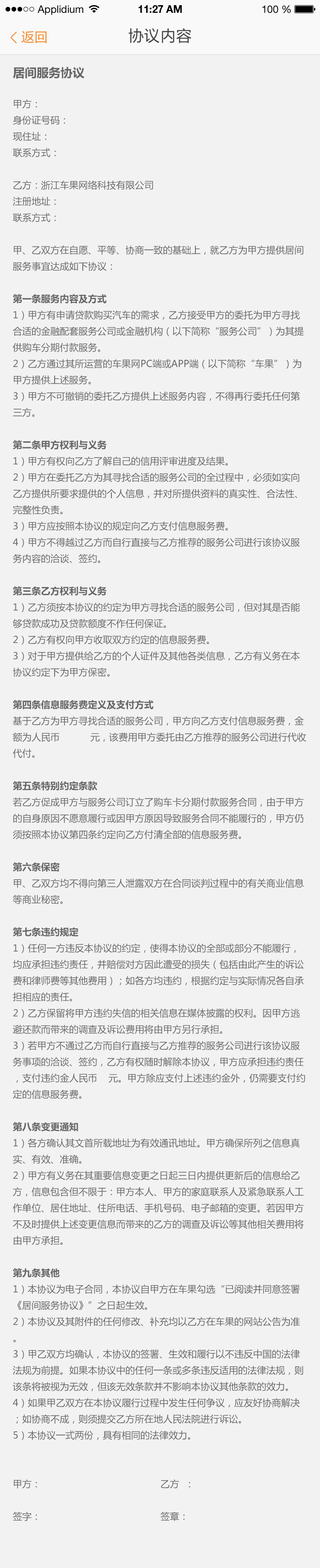
<style>
.page{position:relative;width:320px;height:1568px;background:#f2f2f2}
.page>*{position:absolute;margin:0}
.t1{font:10.3px "HelveticaNeueLTStd-Roman";color:#000000}
.t2{font:10.3px "HelveticaNeueLTStd-Bd";color:#000000}
.t3{font:15.4px "MicrosoftYaHei";letter-spacing:0.038em;color:#404040}
.t4{font:12.8px "MicrosoftYaHei";letter-spacing:0.038em;color:#f68929}
.t5{font:9.4px/16.2px "MicrosoftYaHei";color:#666666}
.t6{font:12px/16.2px "MicrosoftYaHei-Bold";color:#666666}
.t7{font:9.4px/16.2px "MicrosoftYaHei-Bold";color:#666666}
</style>
<div class="page">
<p class="t1" style="left:38px;top:5px;width:45px;height:10px">Applidium</p>
<p class="t2" style="left:138px;top:5px;width:44px;height:8px">11:27 AM</p>
<p class="t1" style="left:263px;top:5px;width:28px;height:8px">100 %</p>
<p class="t3" style="left:129px;top:28px;width:63px;height:15px">协议内容</p>
<p class="t4" style="left:21px;top:31px;width:26px;height:12px">返回</p>
<p class="t5" style="left:13px;top:67px;width:294px;height:1454px"><span class="t6">居间服务协议<br></span><br>甲方：<br>身份证号码： <br>现住址： <br>联系方式：<br><br>乙方：浙江车果网络科技有限公司<br>注册地址：<br>联系方式：<br><br>甲、乙双方在自愿、平等、协商一致的基础上，就乙方为甲方提供居间服务事宜达成如下协议：<br><br><span class="t7">第一条服务内容及方式<br></span>1）甲方有申请贷款购买汽车的需求，乙方接受甲方的委托为甲方寻找合适的金融配套服务公司或金融机构（以下简称“服务公司”）为其提供购车分期付款服务。<br>2）乙方通过其所运营的车果网PC端或APP端（以下简称“车果”）为甲方提供上述服务。<br>3）甲方不可撤销的委托乙方提供上述服务内容，不得再行委托任何第三方。<br><br><span class="t7">第二条甲方权利与义务<br></span>1）甲方有权向乙方了解自己的信用评审进度及结果。<br>2）甲方在委托乙方为其寻找合适的服务公司的全过程中，必须如实向乙方提供所要求提供的个人信息，并对所提供资料的真实性、合法性、完整性负责。<br>3）甲方应按照本协议的规定向乙方支付信息服务费。<br>4）甲方不得越过乙方而自行直接与乙方推荐的服务公司进行该协议服务内容的洽谈、签约。<br><br><span class="t7">第三条乙方权利与义务<br></span>1）乙方须按本协议的约定为甲方寻找合适的服务公司，但对其是否能够贷款成功及贷款额度不作任何保证。<br>2）乙方有权向甲方收取双方约定的信息服务费。<br>3）对于甲方提供给乙方的个人证件及其他各类信息，乙方有义务在本协议约定下为甲方保密。<br><br><span class="t7">第四条信息服务费定义及支付方式<br></span>基于乙方为甲方寻找合适的服务公司，甲方向乙方支付信息服务费，金额为人民币           元，该费用甲方委托由乙方推荐的服务公司进行代收代付。<br><br><span class="t7">第五条特别约定条款<br></span>若乙方促成甲方与服务公司订立了购车卡分期付款服务合同，由于甲方的自身原因不愿意履行或因甲方原因导致服务合同不能履行的，甲方仍须按照本协议第四条约定向乙方付清全部的信息服务费。<br><br><span class="t7">第六条保密<br></span>甲、乙双方均不得向第三人泄露双方在合同谈判过程中的有关商业信息等商业秘密。<br><br><span class="t7">第七条违约规定<br></span>1）任何一方违反本协议的约定，使得本协议的全部或部分不能履行，均应承担违约责任，并赔偿对方因此遭受的损失（包括由此产生的诉讼费和律师费等其他费用）；如各方均违约，根据约定与实际情况各自承担相应的责任。<br>2）乙方保留将甲方违约失信的相关信息在媒体披露的权利。因甲方逃避还款而带来的调查及诉讼费用将由甲方另行承担。<br>3）若甲方不通过乙方而自行直接与乙方推荐的服务公司进行该协议服务事项的洽谈、签约，乙方有权随时解除本协议，甲方应承担违约责任，支付违约金人民币    元。甲方除应支付上述违约金外，仍需要支付约定的信息服务费。<br><br><span class="t7">第八条变更通知<br></span>1）各方确认其文首所载地址为有效通讯地址。甲方确保所列之信息真实、有效、准确。<br>2）甲方有义务在其重要信息变更之日起三日内提供更新后的信息给乙方，信息包含但不限于：甲方本人、甲方的家庭联系人及紧急联系人工作单位、居住地址、住所电话、手机号码、电子邮箱的变更。若因甲方不及时提供上述变更信息而带来的乙方的调查及诉讼等其他相关费用将由甲方承担。<br><br><span class="t7">第九条其他<br></span>1）本协议为电子合同，本协议自甲方在车果勾选“已阅读并同意签署《居间服务协议》”之日起生效。<br>2）本协议及其附件的任何修改、补充均以乙方在车果的网站公告为准。<br>3）甲乙双方均确认，本协议的签署、生效和履行以不违反中国的法律法规为前提。如果本协议中的任何一条或多条违反适用的法律法规，则该条将被视为无效，但该无效条款并不影响本协议其他条款的效力。<br>4）如果甲乙双方在本协议履行过程中发生任何争议，应友好协商解决；如协商不成，则须提交乙方所在地人民法院进行诉讼。<br>5）本协议一式两份，具有相同的法律效力。<br><br><br>甲方：                                           乙方  ：                        <br><br>签字：                                           签章：</p>
</div>
